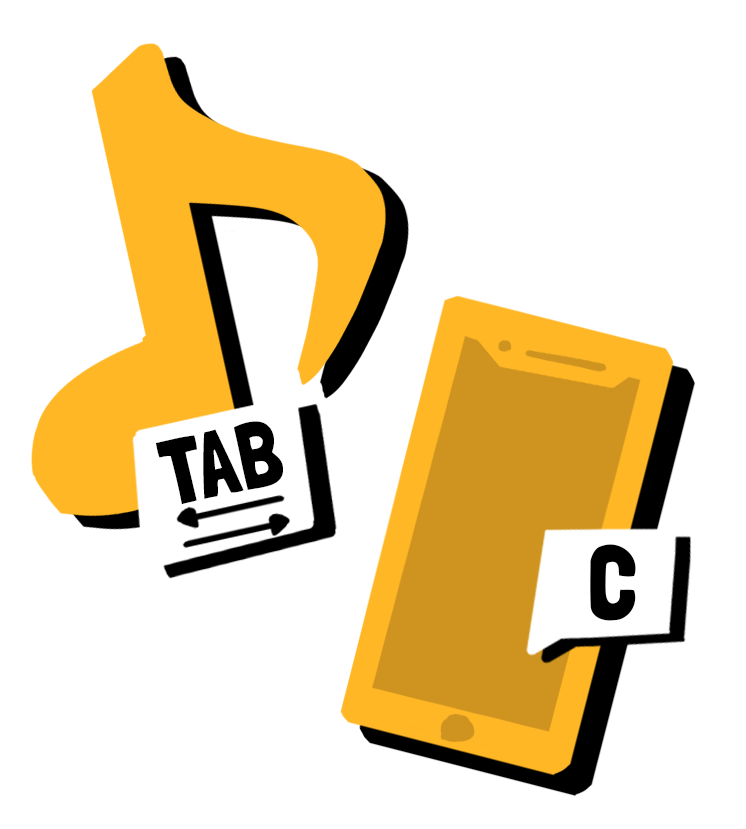
<style>
.page{position:relative;width:746px;height:829px;background:#ffffff}
.page>*{position:absolute;margin:0}
.t1{font:92.7px "LondrinaSolid-Regular";color:#000000}
.t2{font:102.6px "LondrinaSolid-Regular";color:#000000}
</style>
<div class="page">
<p class="t1" style="left:155px;top:421px;width:128px;height:84px;rotate:-12deg">TAB</p>
<p class="t2" style="left:590px;top:544px;width:46px;height:77px">C</p>
</div>
